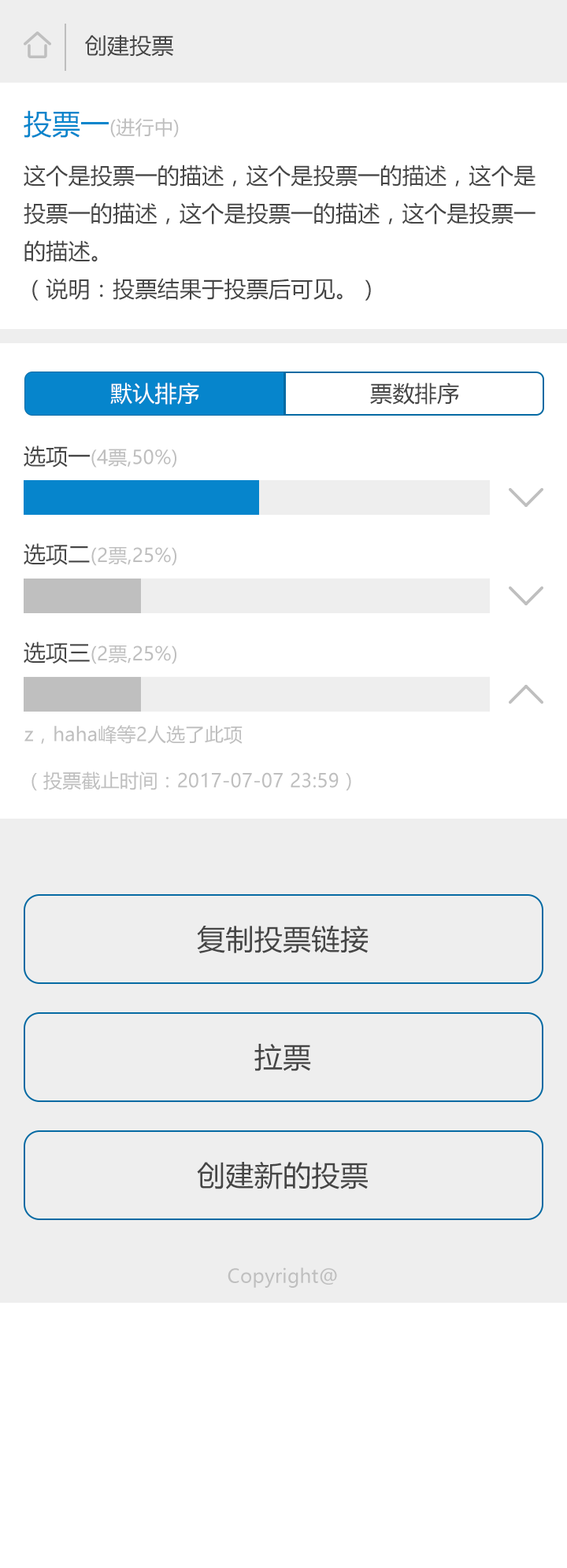
<style>
.page{position:relative;width:567px;height:1568px;background:#ffffff}
.page>*{position:absolute;margin:0}
.t1{font:22px "MicrosoftYaHeiUI";letter-spacing:0.01em;color:#454545}
.t2{font:18.9px "MicrosoftYaHeiUI";letter-spacing:0.01em;color:#bfbfbf}
.t3{font:28.3px "MicrosoftYaHeiUI";letter-spacing:0.01em;color:#0685cc}
.t4{font:22px/37.8px "MicrosoftYaHeiUI";letter-spacing:0.01em;color:#454545}
.t5{font:22px "MicrosoftYaHeiUI";letter-spacing:0.01em;color:#ffffff}
.t6{font:19px "MicrosoftYaHeiUI";letter-spacing:0.01em;color:#bfbfbf}
.t7{font:22.1px "MicrosoftYaHeiUI";letter-spacing:0.01em;color:#454545}
.t8{font:28.3px "MicrosoftYaHeiUI";letter-spacing:0.01em;color:#454545}
</style>
<div class="page">
<p class="t1" style="left:85px;top:35px;width:88px;height:22px">创建投票</p>
<p class="t2" style="left:24px;top:110px;width:155px;height:28px"><span class="t3">投票一</span>(进行中)</p>
<p class="t4" style="left:24px;top:165px;width:511px;height:136px">这个是投票一的描述，这个是投票一的描述，这个是<br>投票一的描述，这个是投票一的描述，这个是投票一<br>的描述。<br>（说明：投票结果于投票后可见。）</p>
<p class="t5" style="left:110px;top:383px;width:89px;height:22px">默认排序</p>
<p class="t1" style="left:370px;top:383px;width:89px;height:22px">票数排序</p>
<p class="t2" style="left:24px;top:446px;width:152px;height:22px"><span class="t1">选项一</span>(4票,50%)</p>
<p class="t6" style="left:24px;top:543px;width:152px;height:23px"><span class="t7">选项二</span>(2票,25%)</p>
<p class="t6" style="left:24px;top:642px;width:152px;height:22px"><span class="t7">选项三</span>(2票,25%)</p>
<p class="t2" style="left:24px;top:725px;width:218px;height:19px">z，haha峰等2人选了此项</p>
<p class="t2" style="left:31px;top:771px;width:320px;height:20px">（投票截止时间：2017-07-07 23:59）</p>
<p class="t8" style="left:197px;top:925px;width:171px;height:28px">复制投票链接</p>
<p class="t8" style="left:254px;top:1044px;width:57px;height:27px">拉票</p>
<p class="t8" style="left:197px;top:1161px;width:171px;height:28px">创建新的投票</p>
<p class="t2" style="left:227px;top:1267px;width:110px;height:21px">Copyright@</p>
</div>
